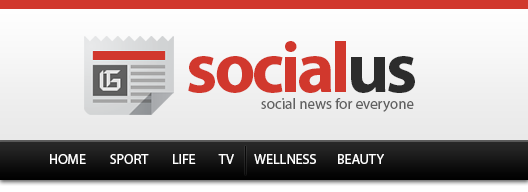
<style>
.page{position:relative;width:528px;height:192px}
.page>*{position:absolute;margin:0}
.t1{font:72px "MyriadPro-Bold";letter-spacing:-0.05em;color:#d1382d}
.t2{font:72px "MyriadPro-Bold";letter-spacing:-0.05em;color:#2c2c2c}
.t3{font:15px "MyriadPro-Regular";color:#616161}
.t4{font:14px "MyriadPro-Regular";color:#ffffff}
</style>
<div class="page">
<p class="t1" style="left:188px;top:41px;width:227px;height:52px">social<span class="t2">us</span></p>
<p class="t3" style="left:261px;top:98px;width:153px;height:14px">social news for everyone</p>
<p class="t4" style="left:50px;top:154px;width:334px;height:10px">HOME        SPORT        LIFE        TV       WELLNESS       BEAUTY</p>
</div>
